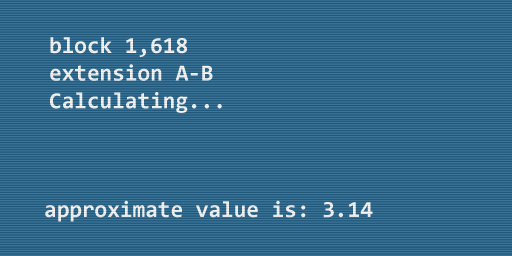
<style>
.page{position:relative;width:512px;height:256px}
.page>*{position:absolute;margin:0}
.t1{font:23px "Consolas-Bold";color:#e9e9e9}
</style>
<div class="page">
<p class="t1" style="left:50px;top:37px;width:172px;height:76px">block 1,618<br>extension A-B<br>Calculating...</p>
<p class="t1" style="left:45px;top:200px;width:328px;height:22px">approximate value is: 3.14</p>
</div>
